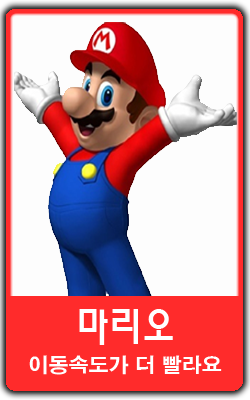
<style>
.page{position:relative;width:250px;height:400px;background:#fdfdfd}
.page>*{position:absolute;margin:0}
.t1{font:40px "MoeumTR-HM";color:#ffffff}
.t2{font:20px "H2gtrE";color:#ffffff}
</style>
<div class="page">
<p class="t1" style="left:79px;top:309px;width:94px;height:36px">마리오</p>
<p class="t2" style="left:29px;top:355px;width:193px;height:20px">이동속도가 더 빨라요</p>
</div>
